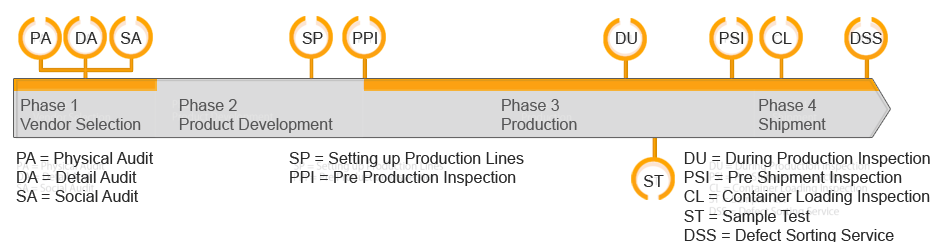
<style>
.page{position:relative;width:945px;height:242px;background:#ffffff}
.page>*{position:absolute;margin:0}
.t1{font:16px "ArialMT";color:#2a2a2a}
.t2{font:16px "ArialMT";color:#565657}
</style>
<div class="page">
<p class="t1" style="left:31px;top:32px;width:21px;height:12px">PA</p>
<p class="t1" style="left:76px;top:32px;width:22px;height:12px">DA</p>
<p class="t1" style="left:121px;top:32px;width:21px;height:12px">SA</p>
<p class="t1" style="left:302px;top:32px;width:21px;height:12px">SP</p>
<p class="t1" style="left:353px;top:32px;width:24px;height:12px">PPI</p>
<p class="t1" style="left:616px;top:32px;width:21px;height:12px">DU</p>
<p class="t1" style="left:719px;top:32px;width:25px;height:12px">PSI</p>
<p class="t1" style="left:772px;top:32px;width:20px;height:12px">CL</p>
<p class="t1" style="left:850px;top:32px;width:32px;height:12px">DSS</p>
<p class="t2" style="left:20px;top:99px;width:121px;height:31px">Phase 1<br>Vendor Selection</p>
<p class="t2" style="left:179px;top:99px;width:154px;height:34px">Phase 2<br>Product Development</p>
<p class="t2" style="left:502px;top:99px;width:75px;height:31px">Phase 3<br>Production</p>
<p class="t2" style="left:759px;top:99px;width:67px;height:34px">Phase 4<br>Shipment</p>
<p class="t1" style="left:16px;top:152px;width:138px;height:50px">PA = Physical Audit<br>DA = Detail Audit<br>SA = Social Audit</p>
<p class="t1" style="left:289px;top:152px;width:235px;height:34px">SP = Setting up Production Lines<br>PPI = Pre Production Inspection</p>
<p class="t1" style="left:684px;top:152px;width:246px;height:92px">DU = During Production Inspection<br>PSI = Pre Shipment Inspection<br>CL = Container Loading Inspection<br>ST = Sample Test<br>DSS = Defect Sorting Service</p>
<p class="t1" style="left:644px;top:175px;width:20px;height:12px">ST</p>
</div>
